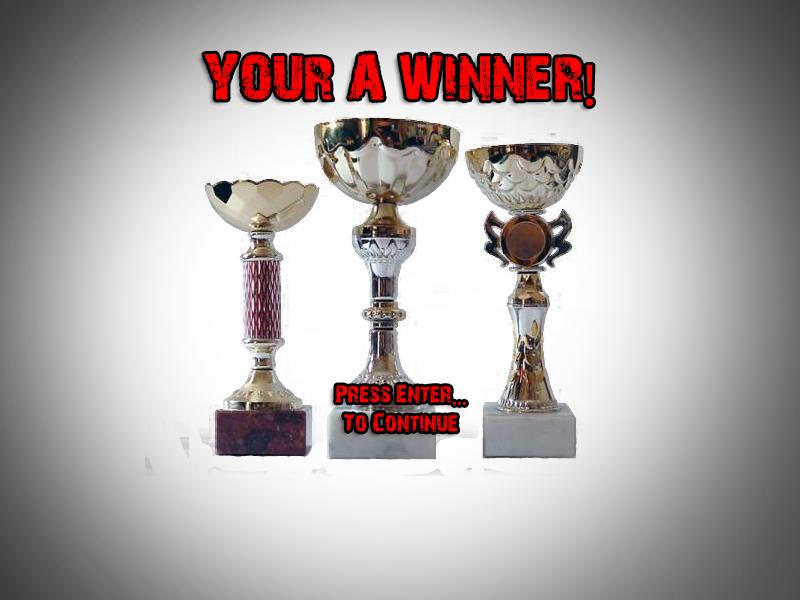
<style>
.page{position:relative;width:800px;height:600px}
.page>*{position:absolute;margin:0}
.t1{font:60px "28-Days-Later-Regular";color:#ff0000}
.t2{font:60px "MyriadPro-Regular";color:#ff0000}
.t3{font:24px "28-Days-Later-Regular";color:#ff0000}
.t4{font:24px "MyriadPro-Regular";color:#ff0000}
</style>
<div class="page">
<p class="t1" style="left:204px;top:53px;width:389px;height:53px">YOUR A WINNER<span class="t2">!</span></p>
<p class="t3" style="left:336px;top:385px;width:130px;height:47px;text-align:center">Press Enter<span class="t4">...</span><br>To Continue</p>
</div>
